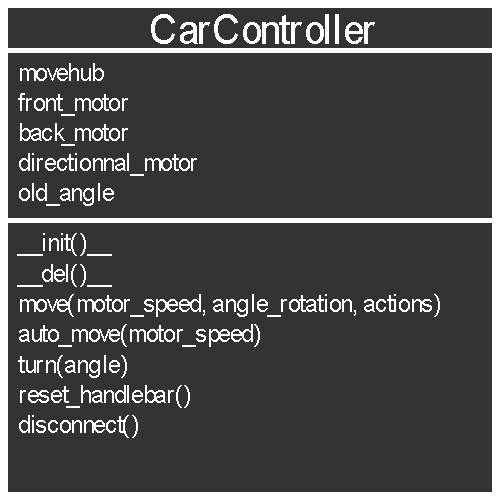
<style>
.page{position:relative;width:500px;height:500px;background:#333333}
.page>*{position:absolute;margin:0}
.t1{font:40.6px "ArialMT";color:#ffffff}
.t2{font:24.5px "ArialMT";color:#ffffff}
</style>
<div class="page">
<p class="t1" style="left:151px;top:14px;width:224px;height:30px">CarController</p>
<p class="t2" style="left:20px;top:63px;width:84px;height:18px">movehub</p>
<p class="t2" style="left:18px;top:93px;width:110px;height:23px">front_motor</p>
<p class="t2" style="left:20px;top:123px;width:108px;height:23px">back_motor</p>
<p class="t2" style="left:19px;top:153px;width:178px;height:23px">directionnal_motor</p>
<p class="t2" style="left:19px;top:183px;width:95px;height:23px">old_angle</p>
<p class="t2" style="left:17px;top:233px;width:95px;height:23px">__init()__</p>
<p class="t2" style="left:17px;top:264px;width:95px;height:23px">__del()__</p>
<p class="t2" style="left:20px;top:294px;width:420px;height:23px">move(motor_speed, angle_rotation, actions)</p>
<p class="t2" style="left:19px;top:324px;width:241px;height:23px">auto_move(motor_speed)</p>
<p class="t2" style="left:18px;top:355px;width:109px;height:23px">turn(angle)</p>
<p class="t2" style="left:20px;top:385px;width:170px;height:23px">reset_handlebar()</p>
<p class="t2" style="left:19px;top:415px;width:119px;height:23px">disconnect()</p>
</div>
